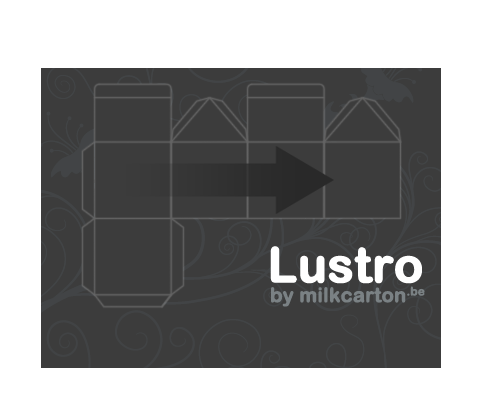
<style>
.page{position:relative;width:482px;height:404px;background:#3c3c3c}
.page>*{position:absolute;margin:0}
.t1{font:48px "ArialRoundedMTBold";letter-spacing:-0.01em;color:#ffffff;font-weight:bold}
.t2{font:20px "ArialRoundedMTBold";letter-spacing:-0.01em;color:#7a8184;font-weight:bold}
</style>
<div class="page">
<p class="t1" style="left:270px;top:246px;width:152px;height:38px">Lustro</p>
<p class="t2" style="left:271px;top:286px;width:154px;height:21px">by milkcarton.be</p>
</div>
